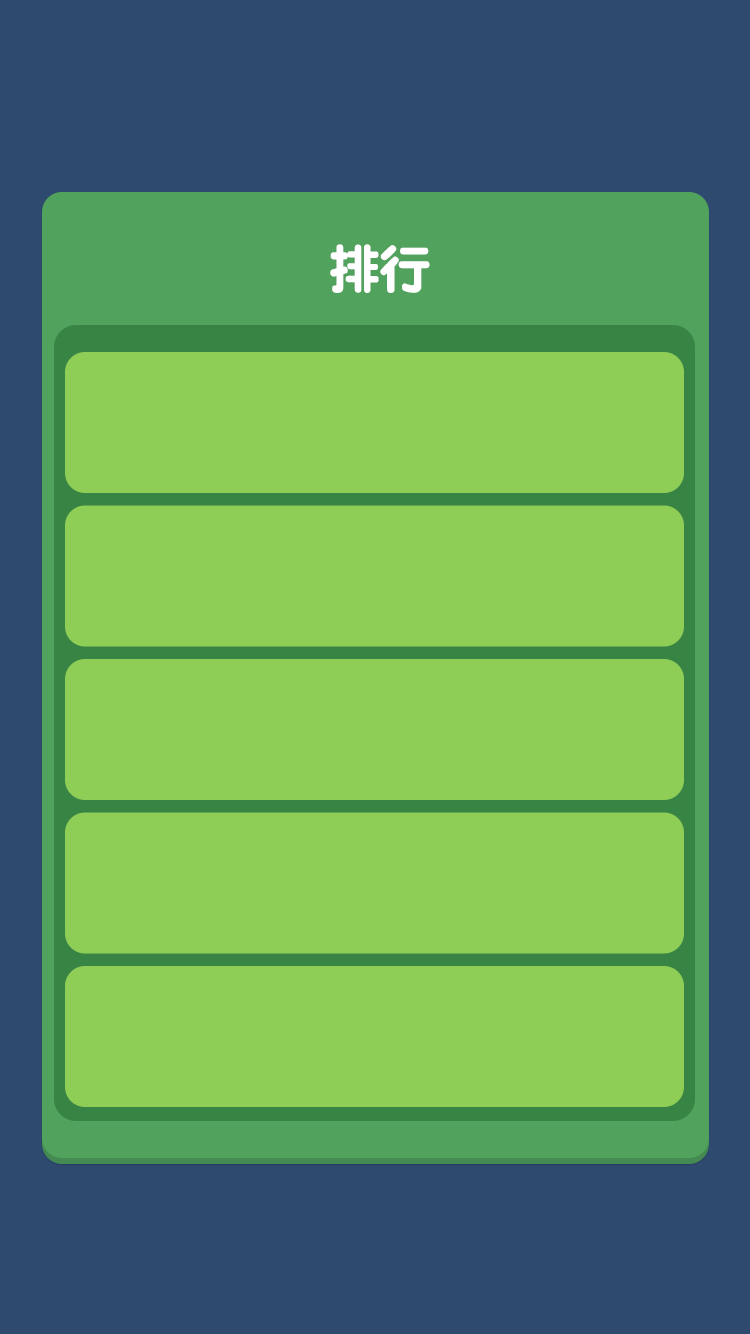
<style>
.page{position:relative;width:750px;height:1334px;background:#8fce56}
.page>*{position:absolute;margin:0}
.t1{font:53.3px "DFPYuanW9";letter-spacing:-0.05em;color:#ffffff}
</style>
<div class="page">
<p class="t1" style="left:330px;top:244px;width:100px;height:49px">排行</p>
</div>
